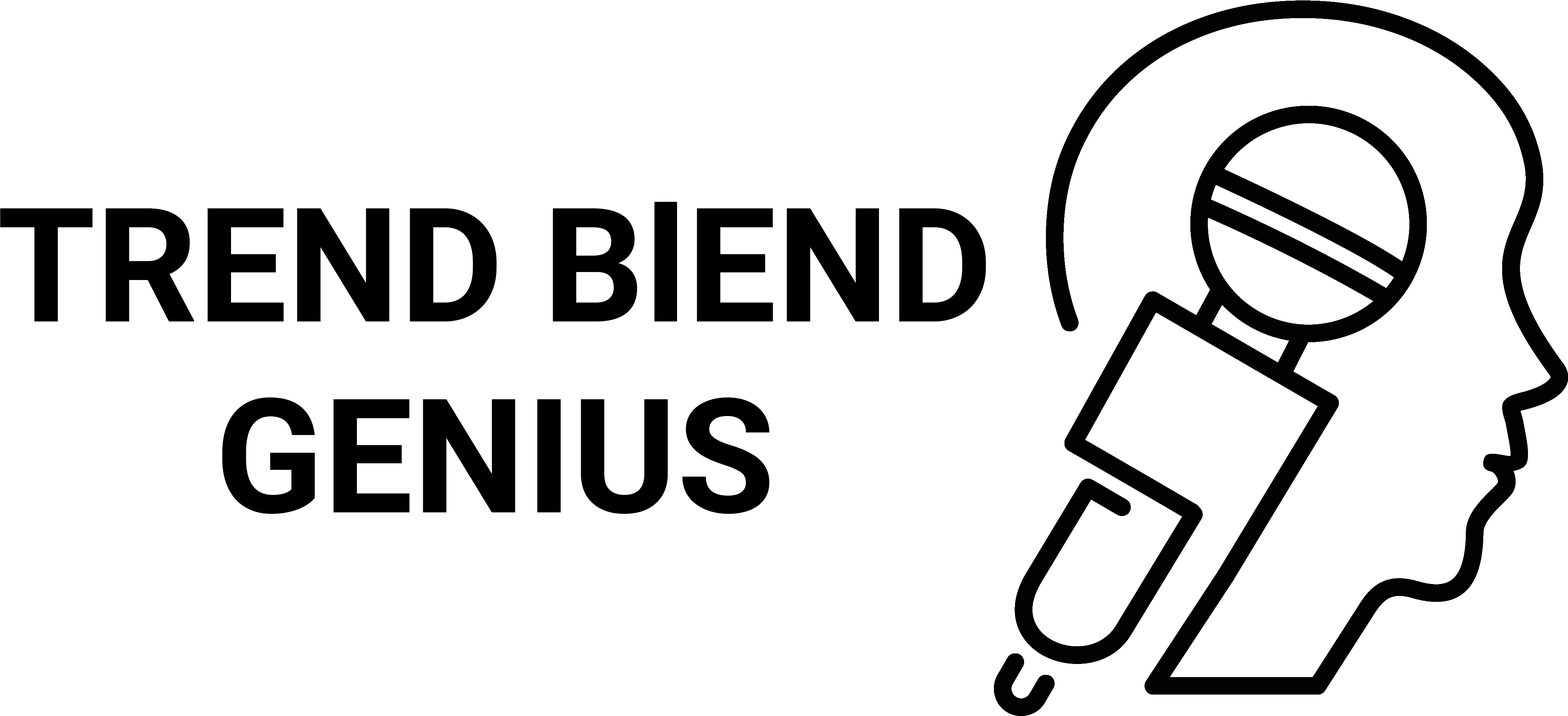
<style>
.page{position:relative;width:1568px;height:716px;background:#ffffff}
.page>*{position:absolute;margin:0}
.t1{font:159.4px "Roboto-Bold";color:#000000}
</style>
<div class="page">
<p class="t1" style="left:0px;top:202px;width:986px;height:312px;text-align:center">TREND BlEND<br>GENIUS</p>
</div>
